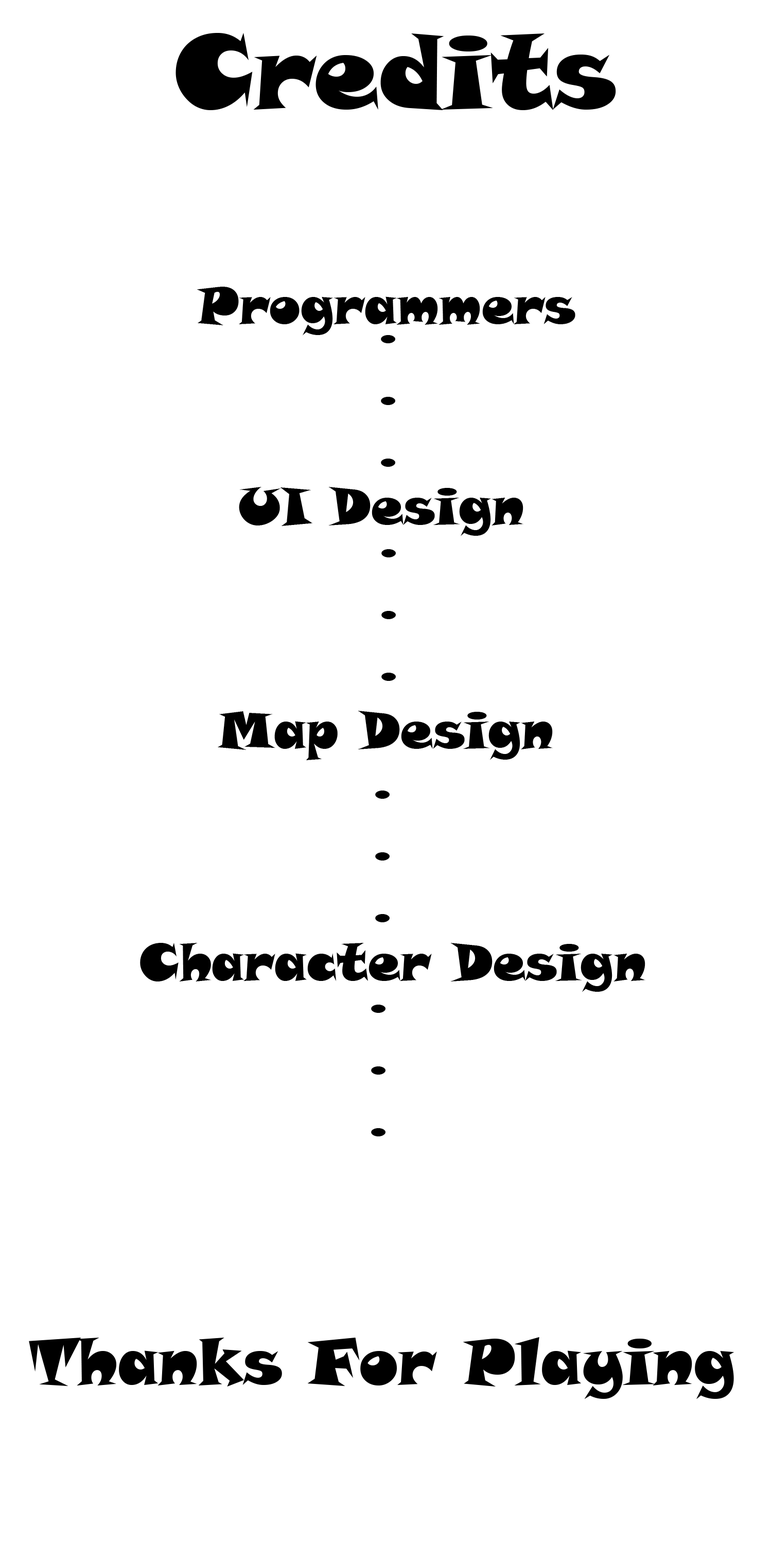
<style>
.page{position:relative;width:772px;height:1544px;background:#ffffff}
.page>*{position:absolute;margin:0}
.t1{font:103px "SnapITC-Regular";color:#000000}
.t2{font:51.5px "SnapITC-Regular";color:#000000}
.t3{font:64.3px "SnapITC-Regular";color:#000000}
</style>
<div class="page">
<p class="t1" style="left:176px;top:33px;width:440px;height:77px">Credits</p>
<p class="t2" style="left:197px;top:287px;width:379px;height:49px">Programmers</p>
<p class="t2" style="left:381px;top:335px;width:14px;height:132px">.<br>.<br>.</p>
<p class="t2" style="left:239px;top:487px;width:285px;height:49px">UI Design</p>
<p class="t2" style="left:381px;top:549px;width:15px;height:132px">.<br>.<br>.</p>
<p class="t2" style="left:218px;top:711px;width:335px;height:49px">Map Design</p>
<p class="t2" style="left:375px;top:791px;width:15px;height:131px">.<br>.<br>.</p>
<p class="t2" style="left:140px;top:943px;width:506px;height:49px">Character Design</p>
<p class="t2" style="left:371px;top:1005px;width:15px;height:132px">.<br>.<br>.</p>
<p class="t3" style="left:29px;top:1337px;width:706px;height:63px">Thanks For Playing</p>
</div>
